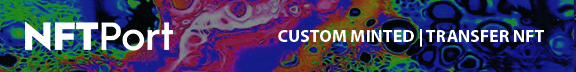
<style>
.page{position:relative;width:576px;height:72px}
.page>*{position:absolute;margin:0}
.t1{font:17.8px "MyriadPro-Bold";color:#ffffff}
</style>
<div class="page">
<p class="t1" style="left:278px;top:29px;width:266px;height:18px">CUSTOM MINTED | TRANSFER NFT</p>
</div>
